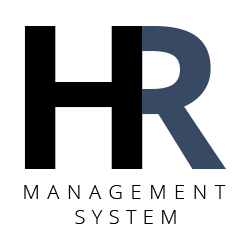
<style>
.page{position:relative;width:250px;height:250px;background:#ffffff}
.page>*{position:absolute;margin:0}
.t1{font:200px "OpenSans-Bold";letter-spacing:0.1em;color:#000000}
.t2{font:200px "OpenSans-Bold";letter-spacing:0.1em}
.t3{font:20px "OpenSans-Light";letter-spacing:0.38em;color:#000000}
.t4{font:20px "OpenSans-Light";letter-spacing:0.32em;color:#000000}
</style>
<div class="page">
<p class="t1" style="left:24px;top:26px;width:118px;height:143px">H</p>
<p class="t2" style="left:111px;top:26px;width:116px;height:143px">R</p>
<p class="t3" style="left:24px;top:185px;width:202px;height:14px">MANAGEMENT</p>
<p class="t4" style="left:75px;top:210px;width:101px;height:14px">SYSTEM</p>
</div>
